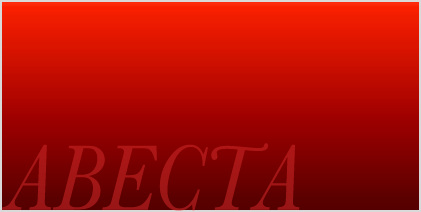
<style>
.page{position:relative;width:421px;height:212px}
.page>*{position:absolute;margin:0}
.t1{font:96px "Baskerville-Italic";color:#a31616;scale:0.85 1}
</style>
<div class="page">
<p class="t1" style="left:1px;top:143px;width:299px;height:68px">АВЕСТА</p>
</div>
